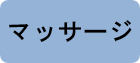
<style>
.page{position:relative;width:140px;height:63px;background:#95b3d7}
.page>*{position:absolute;margin:0}
.t1{font:24px "HGSGothicE";letter-spacing:0.065em;color:#000000}
</style>
<div class="page">
<p class="t1" style="left:9px;top:20px;width:123px;height:22px">マッサージ</p>
</div>
